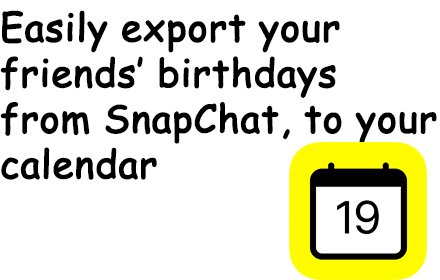
<style>
.page{position:relative;width:440px;height:280px;background:#ffffff}
.page>*{position:absolute;margin:0}
.t1{font:38px "ComicSansMS";color:#000000;font-weight:bold}
</style>
<div class="page">
<p class="t1" style="left:0px;top:10px;width:437px;height:170px">Easily export your friends’ birthdays from SnapChat, to your calendar</p>
</div>
